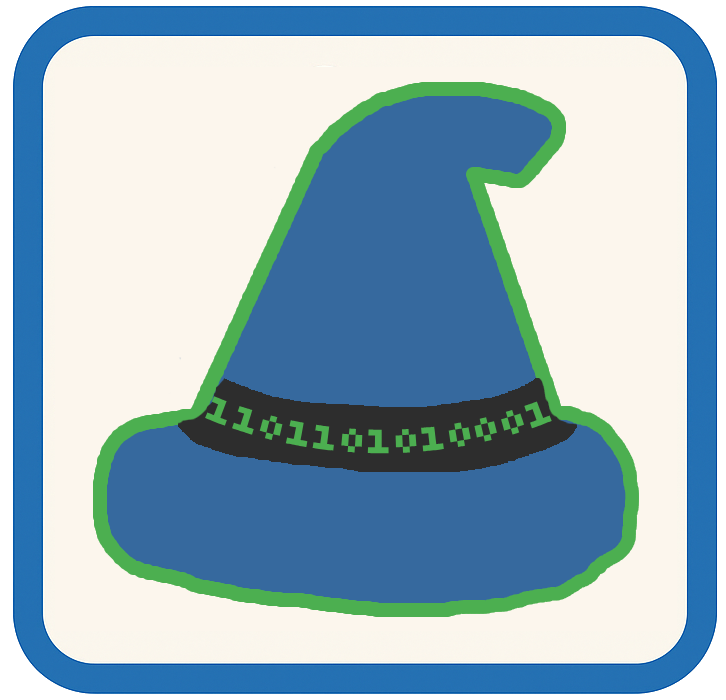
<style>
.page{position:relative;width:726px;height:700px;background:#fcf6ed}
.page>*{position:absolute;margin:0}
.t1{font:47px "Bytesized-Regular";color:#4caf50}
</style>
<div class="page">
<p class="t1" style="left:205px;top:396px;width:347px;height:58px">1101101010001</p>
</div>
